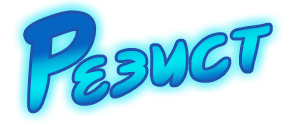
<style>
.page{position:relative;width:300px;height:125px;background:#ffffff}
.page>*{position:absolute;margin:0}
.t1{font:75px "Eurotype2016";letter-spacing:0.035em;font-weight:bold;scale:1.19 1}
.t2{font:116.7px "Eurotype2016";letter-spacing:-0.045em;font-weight:bold;scale:1.19 1}
</style>
<div class="page">
<p class="t1" style="left:26px;top:13px;width:244px;height:98px;rotate:-10deg"><span class="t2">Р</span>езист</p>
</div>
